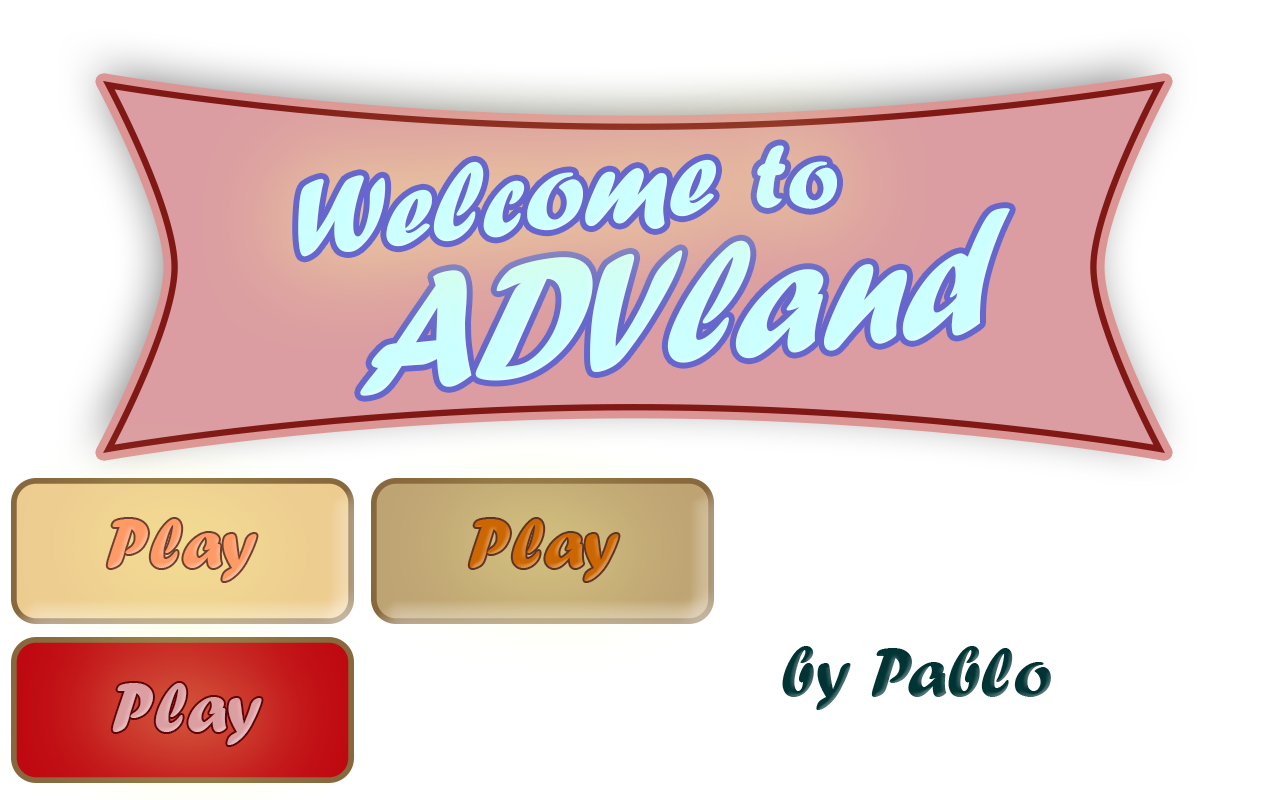
<style>
.page{position:relative;width:1280px;height:800px;background:#ffffff}
.page>*{position:absolute;margin:0}
.t1{font:95.8px "ForteMT";color:#ccffff}
.t2{font:114.3px "ForteMT";color:#ccffff}
.t3{font:180.3px "ForteMT";color:#ccffff;scale:0.86 1}
.t4{font:72px "ForteMT";color:#ff9966}
.t5{font:72px "ForteMT";color:#cc6600}
.t6{font:72px "ForteMT";color:#003333}
.t7{font:72px "ForteMT";color:#db9ea1}
</style>
<div class="page">
<p class="t1" style="left:756px;top:145px;width:81px;height:64px;rotate:-1deg">to</p>
<p class="t2" style="left:298px;top:159px;width:418px;height:98px;rotate:-6deg">Welcome</p>
<p class="t3" style="left:360px;top:208px;width:650px;height:188px;rotate:-6deg">ADVland</p>
<p class="t4" style="left:107px;top:519px;width:150px;height:62px">Play</p>
<p class="t5" style="left:469px;top:519px;width:150px;height:62px">Play</p>
<p class="t6" style="left:782px;top:646px;width:269px;height:64px">by Pablo</p>
<p class="t7" style="left:112px;top:683px;width:150px;height:62px">Play</p>
</div>
